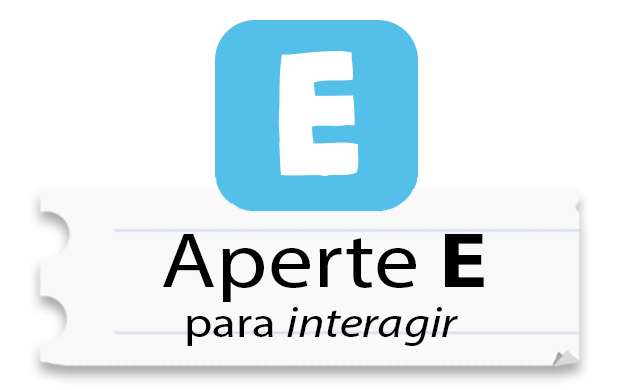
<style>
.page{position:relative;width:620px;height:390px;background:#ffffff}
.page>*{position:absolute;margin:0}
.t1{font:214.4px "PetangueDEMO";color:#ffffff;scale:1.16 1}
.t2{font:78.1px "MyriadPro-Regular";color:#000000;scale:1.16 1}
.t3{font:78.1px "MyriadPro-Bold";color:#000000;scale:1.16 1}
.t4{font:43.1px "MyriadPro-It";color:#000000;scale:1.16 1}
.t5{font:43.1px "MyriadPro-Regular";color:#000000;scale:1.16 1}
</style>
<div class="page">
<p class="t1" style="left:278px;top:51px;width:81px;height:125px">E</p>
<p class="t2" style="left:163px;top:234px;width:321px;height:68px">Aperte <span class="t3">E</span></p>
<p class="t4" style="left:187px;top:307px;width:271px;height:39px"><span class="t5">para </span>interagir</p>
</div>
